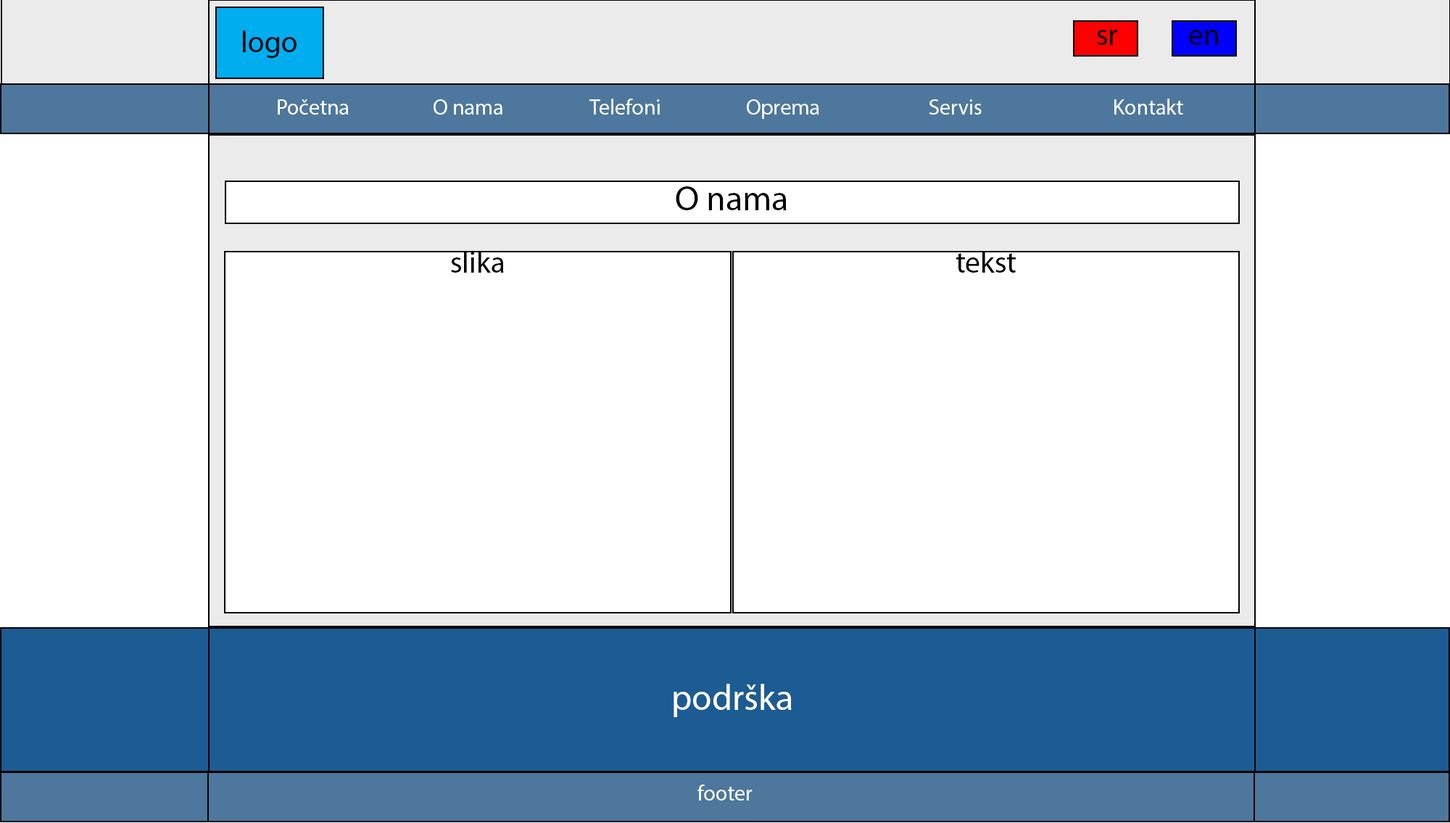
<style>
.page{position:relative;width:1450px;height:823px;background:#ffffff}
.page>*{position:absolute;margin:0}
.t1{font:30.2px "MyriadPro-Regular";color:#000101}
.t2{font:21.7px "MyriadPro-Regular";color:#ffffff}
.t3{font:17.4px "MyriadPro-Regular";color:#000101}
.t4{font:34.8px "MyriadPro-Regular";color:#000000}
.t5{font:30.2px "MyriadPro-Regular";color:#000000}
.t6{font:36.2px "MyriadPro-Regular";color:#ffffff}
</style>
<div class="page">
<p class="t1" style="left:1097px;top:30px;width:20px;height:15px">sr</p>
<p class="t1" style="left:1189px;top:30px;width:29px;height:15px">en</p>
<p class="t1" style="left:243px;top:30px;width:53px;height:28px">logo</p>
<p class="t2" style="left:278px;top:99px;width:905px;height:20px"><span class="t3">  </span>Početna    O nama    Telefoni    Oprema     Servis   Kontakt</p>
<p class="t4" style="left:675px;top:186px;width:111px;height:24px">O nama</p>
<p class="t5" style="left:451px;top:251px;width:53px;height:22px">slika</p>
<p class="t5" style="left:956px;top:251px;width:59px;height:22px">tekst</p>
<p class="t6" style="left:673px;top:683px;width:118px;height:34px">podrška</p>
<p class="t2" style="left:697px;top:784px;width:55px;height:16px">footer</p>
</div>
